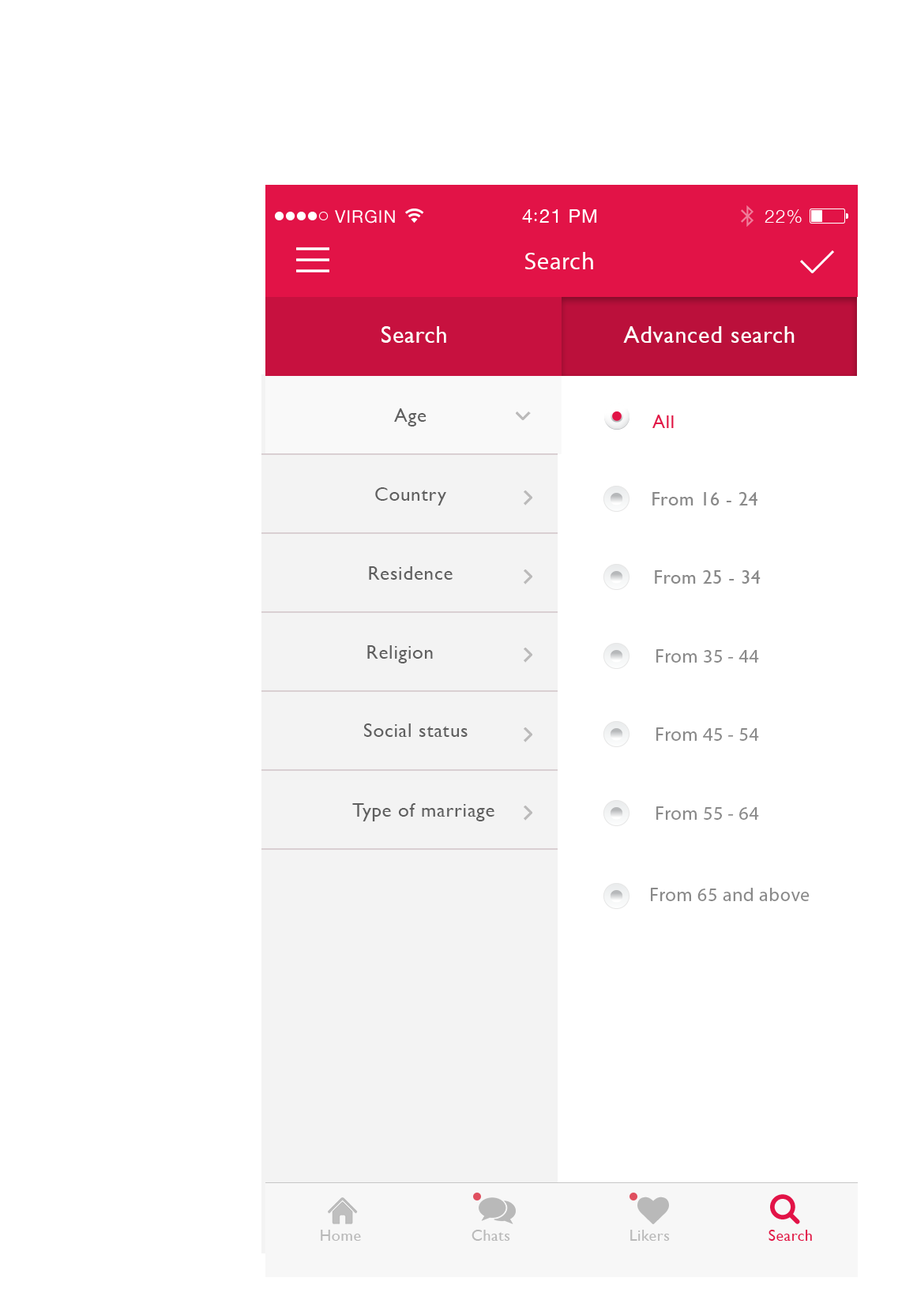
<style>
.page{position:relative;width:917px;height:1300px;background:#ffffff}
.page>*{position:absolute;margin:0}
.t1{font:23.7px "MyriadPro-Regular";letter-spacing:0.029em;color:#ffffff}
.t2{font:23.7px "GillSans";letter-spacing:0.029em;color:#ffffff}
.t3{font:19.7px "GillSans";letter-spacing:0.029em;color:#5f5f5f}
.t4{font:19px "GillSans";letter-spacing:0.029em;color:#e21347}
.t5{font:19px "GillSans";letter-spacing:0.029em;color:#898989}
.t6{font:19px "MyriadPro-Regular";letter-spacing:0.029em;color:#898989}
.t7{font:15.8px "GillSans";letter-spacing:0.029em;color:#b9b9b9}
.t8{font:15.8px "GillSans";letter-spacing:0.029em;color:#e21347}
</style>
<div class="page">
<p class="t1" style="left:525px;top:252px;width:68px;height:17px">Search</p>
<p class="t2" style="left:382px;top:326px;width:64px;height:17px">Search</p>
<p class="t2" style="left:623px;top:326px;width:172px;height:17px">Advanced search</p>
<p class="t3" style="left:394px;top:408px;width:33px;height:19px">Age</p>
<p class="t4" style="left:652px;top:415px;width:22px;height:13px">All</p>
<p class="t3" style="left:375px;top:487px;width:71px;height:19px">Country</p>
<p class="t5" style="left:652px;top:492px;width:106px;height:14px">From 16 - 24</p>
<p class="t3" style="left:369px;top:566px;width:84px;height:14px">Residence</p>
<p class="t5" style="left:655px;top:570px;width:106px;height:14px">From 25 - 34</p>
<p class="t3" style="left:367px;top:645px;width:66px;height:19px">Religion</p>
<p class="t6" style="left:656px;top:649px;width:103px;height:14px">From 35 - 44</p>
<p class="t3" style="left:364px;top:724px;width:104px;height:13px">Social status</p>
<p class="t6" style="left:656px;top:728px;width:103px;height:13px">From 45 - 54</p>
<p class="t3" style="left:352px;top:803px;width:142px;height:19px">Type of marriage</p>
<p class="t6" style="left:656px;top:807px;width:103px;height:13px">From 55 - 64</p>
<p class="t6" style="left:651px;top:888px;width:159px;height:13px">From 65 and above</p>
<p class="t7" style="left:321px;top:1230px;width:40px;height:11px">Home</p>
<p class="t7" style="left:472px;top:1230px;width:38px;height:11px">Chats</p>
<p class="t7" style="left:630px;top:1230px;width:40px;height:11px">Likers</p>
<p class="t8" style="left:769px;top:1230px;width:43px;height:11px">Search</p>
</div>
